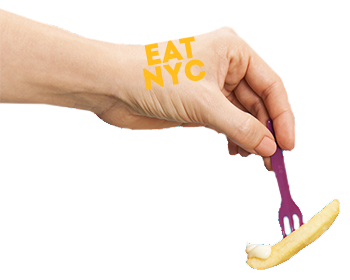
<style>
.page{position:relative;width:350px;height:280px;background:#ffffff}
.page>*{position:absolute;margin:0}
.t1{font:29.7px/23.3px "Intro-Inline";color:#ffbe1b;text-transform:uppercase}
</style>
<div class="page">
<p class="t1" style="left:143px;top:36px;width:63px;height:54px;text-align:center;rotate:-10deg">EAT<br>NYC</p>
</div>
